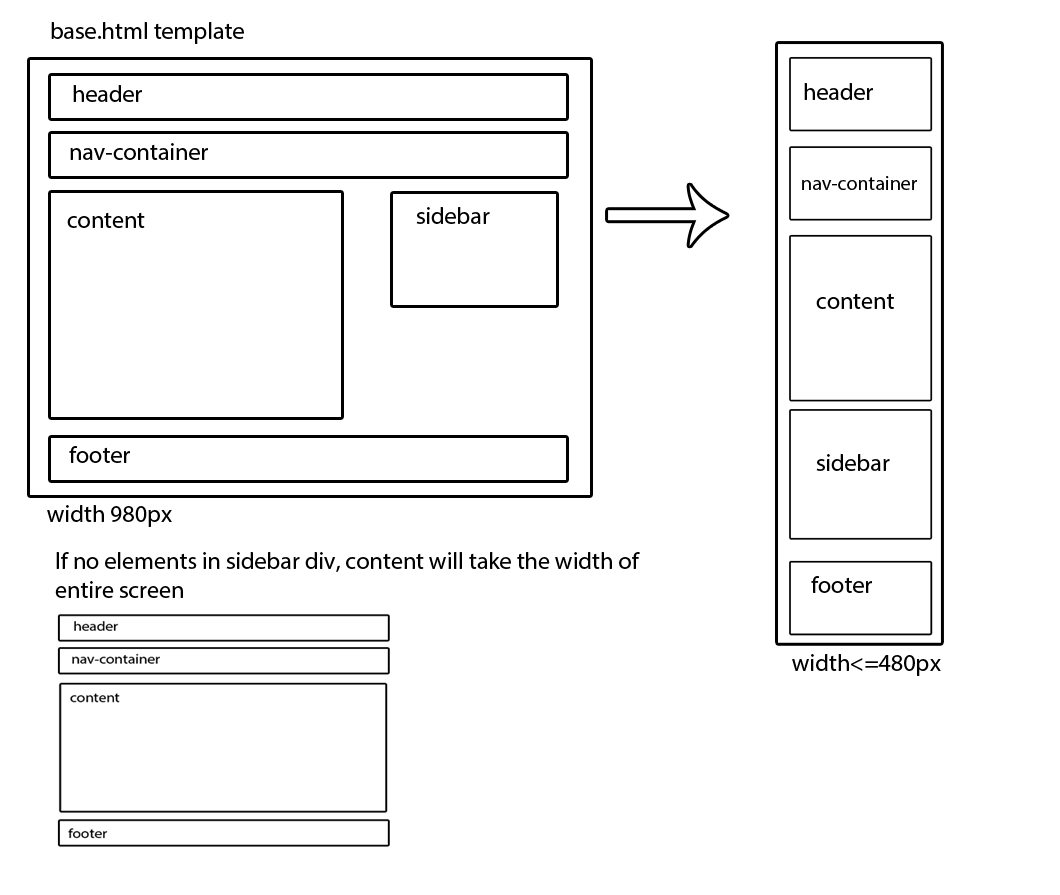
<style>
.page{position:relative;width:1060px;height:895px;background:#ffffff}
.page>*{position:absolute;margin:0}
.t1{font:24px "MyriadPro-Regular";color:#000000}
.t2{font:20.1px "MyriadPro-Regular";color:#000000}
</style>
<div class="page">
<p class="t1" style="left:51px;top:22px;width:193px;height:22px">base.html template</p>
<p class="t1" style="left:804px;top:83px;width:69px;height:17px">header</p>
<p class="t2" style="left:802px;top:176px;width:115px;height:14px">nav-container</p>
<p class="t1" style="left:416px;top:207px;width:74px;height:17px">sidebar</p>
<p class="t1" style="left:816px;top:293px;width:78px;height:16px">content</p>
<p class="t1" style="left:69px;top:446px;width:61px;height:17px">footer</p>
<p class="t1" style="left:816px;top:454px;width:74px;height:17px">sidebar</p>
<p class="t1" style="left:47px;top:505px;width:125px;height:22px">width 980px</p>
<p class="t1" style="left:55px;top:552px;width:585px;height:46px">If no elements in sidebar div, content will take the width of<br>entire screen</p>
<p class="t1" style="left:811px;top:576px;width:61px;height:17px">footer</p>
<p class="t1" style="left:792px;top:654px;width:149px;height:22px">width&lt;=480px</p>
</div>
